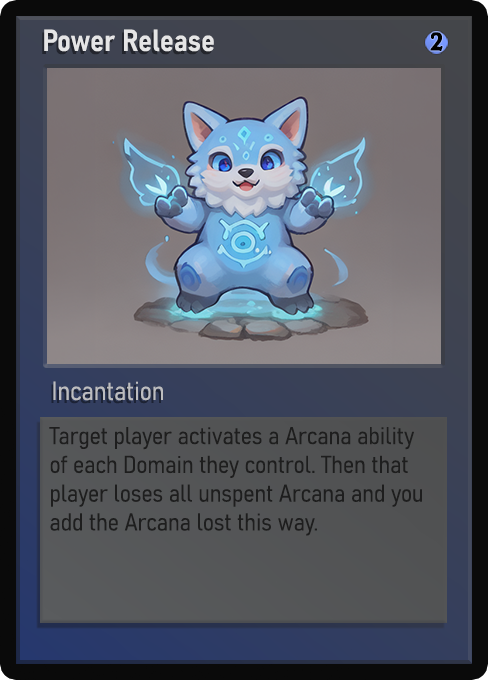
<style>
.page{position:relative;width:488px;height:680px}
.page>*{position:absolute;margin:0}
.t1{font:30px "Bahnschrift-SemiBoldSemiCondensed";color:#f2f2f2;font-weight:bold}
.t2{font:25px "WTRRoycroft";color:#000000;font-weight:bold;scale:1.09 1}
.t3{font:26px "Bahnschrift-LightSemiCondensed";color:#c8c8c8;font-weight:bold}
.t4{font:24px "Bahnschrift-LightSemiCondensed";color:#1e1e1e;font-weight:bold}
</style>
<div class="page">
<p class="t1" style="left:44px;top:29px;width:170px;height:23px;opacity:0.9">Power Release</p>
<p class="t2" style="left:430px;top:32px;width:13px;height:19px">2</p>
<p class="t3" style="left:53px;top:381px;width:110px;height:20px;opacity:0.9">Incantation</p>
<p class="t4" style="left:49px;top:427px;width:373px;height:109px">Target player activates a Arcana ability of each Domain they control. Then that player loses all unspent Arcana and you add the Arcana lost this way.</p>
</div>
